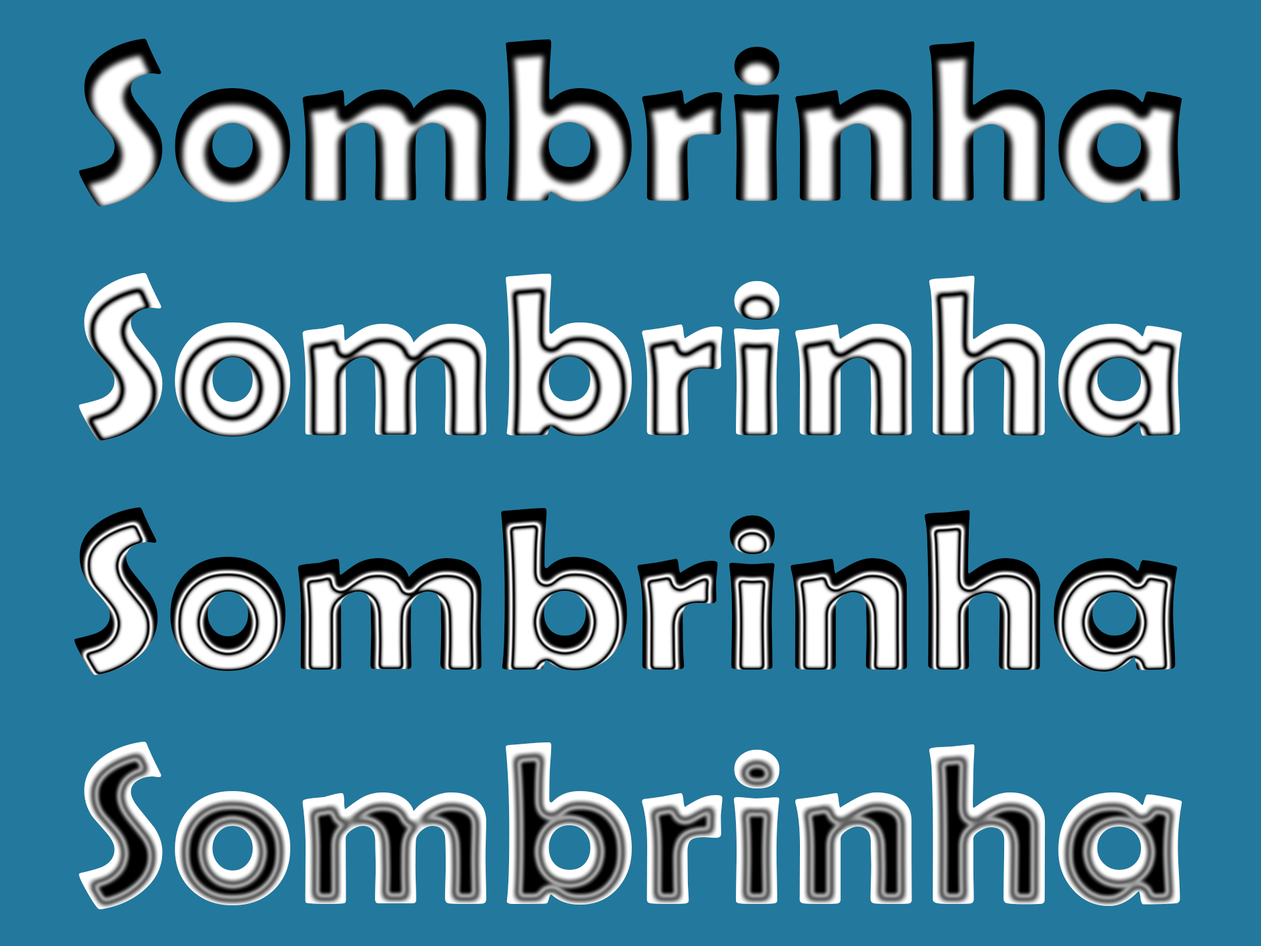
<style>
.page{position:relative;width:1261px;height:946px;background:#22799d}
.page>*{position:absolute;margin:0}
.t1{font:228.9px "BerlinSansFBDemi-Bold"}
</style>
<div class="page">
<p class="t1" style="left:79px;top:39px;width:1103px;height:167px">Sombrinha</p>
<p class="t1" style="left:79px;top:273px;width:1103px;height:167px">Sombrinha</p>
<p class="t1" style="left:74px;top:507px;width:1104px;height:168px">Sombrinha</p>
<p class="t1" style="left:79px;top:741px;width:1103px;height:168px">Sombrinha</p>
</div>
